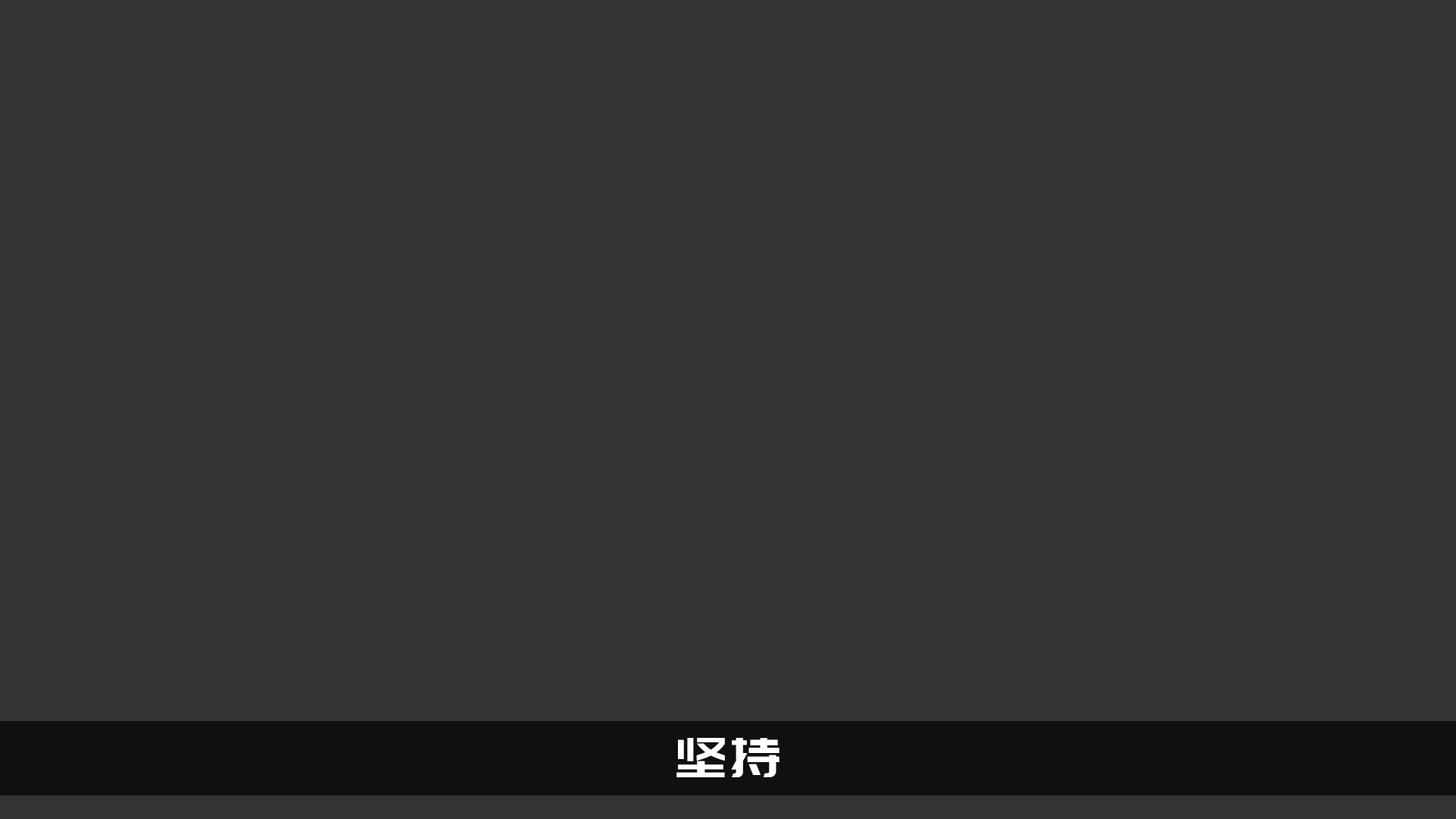
<style>
.page{position:relative;width:1456px;height:819px;background:#333333}
.page>*{position:absolute;margin:0}
.t1{font:54.6px "PangMenZhengDao-3";color:#ffffff}
</style>
<div class="page">
<p class="t1" style="left:676px;top:738px;width:104px;height:39px">坚持</p>
</div>
